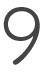
<style>
.page{position:relative;width:45px;height:72px;background:#ffffff}
.page>*{position:absolute;margin:0}
.t1{font:77.8px "TsukuBRdGothic-Regular";letter-spacing:0.06em;color:#444444}
</style>
<div class="page">
<p class="t1" style="left:3px;top:7px;width:37px;height:58px">9</p>
</div>
